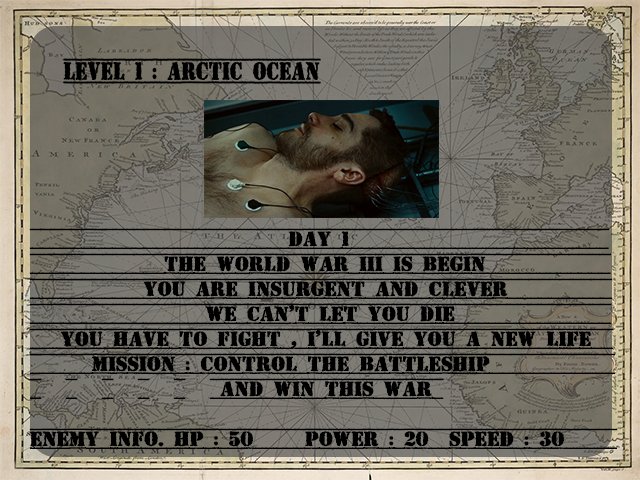
<style>
.page{position:relative;width:640px;height:480px}
.page>*{position:absolute;margin:0}
.t1{font:20.9px "TopSecret";letter-spacing:-0.02em;color:#000000;text-transform:uppercase;font-weight:bold}
</style>
<div class="page">
<p class="t1" style="left:29px;top:228px;width:589px;height:222px">day 1                         <br>             the world war iii is begin            <br>           you are insurgent and clever          <br>                 we can’t let you die               <br>   you have to fight , i’ll give you a new life  <br>      mission : control the battleship            <br>      and win this war <br><br>enemy info. hp : 50     power : 20  speed : 30</p>
</div>
